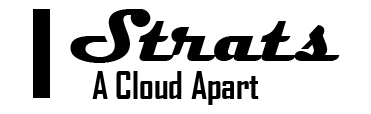
<style>
.page{position:relative;width:371px;height:114px;background:#ffffff}
.page>*{position:absolute;margin:0}
.t1{font:75px "Magneto-Bold";color:#000000}
.t2{font:36px "AgencyFB-Bold";color:#000000}
</style>
<div class="page">
<p class="t1" style="left:70px;top:9px;width:270px;height:54px">Strats</p>
<p class="t2" style="left:92px;top:71px;width:167px;height:34px">A Cloud Apart</p>
</div>
